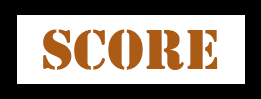
<style>
.page{position:relative;width:261px;height:99px;background:#ffffff}
.page>*{position:absolute;margin:0}
.t1{font:58.3px "Stencil";color:#ac5b14}
</style>
<div class="page">
<p class="t1" style="left:43px;top:29px;width:175px;height:41px">score</p>
</div>
